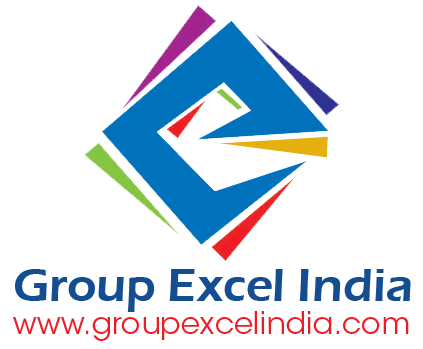
<style>
.page{position:relative;width:423px;height:349px;background:#ffffff}
.page>*{position:absolute;margin:0}
.t1{font:48px "ErasITC-Demi";color:#154d91}
.t2{font:30.5px "ITCAvantGardeStd-Bk";color:#ed1c24}
</style>
<div class="page">
<p class="t1" style="left:15px;top:269px;width:396px;height:43px">Group Excel India</p>
<p class="t2" style="left:13px;top:311px;width:396px;height:30px">www.groupexcelindia.com</p>
</div>
